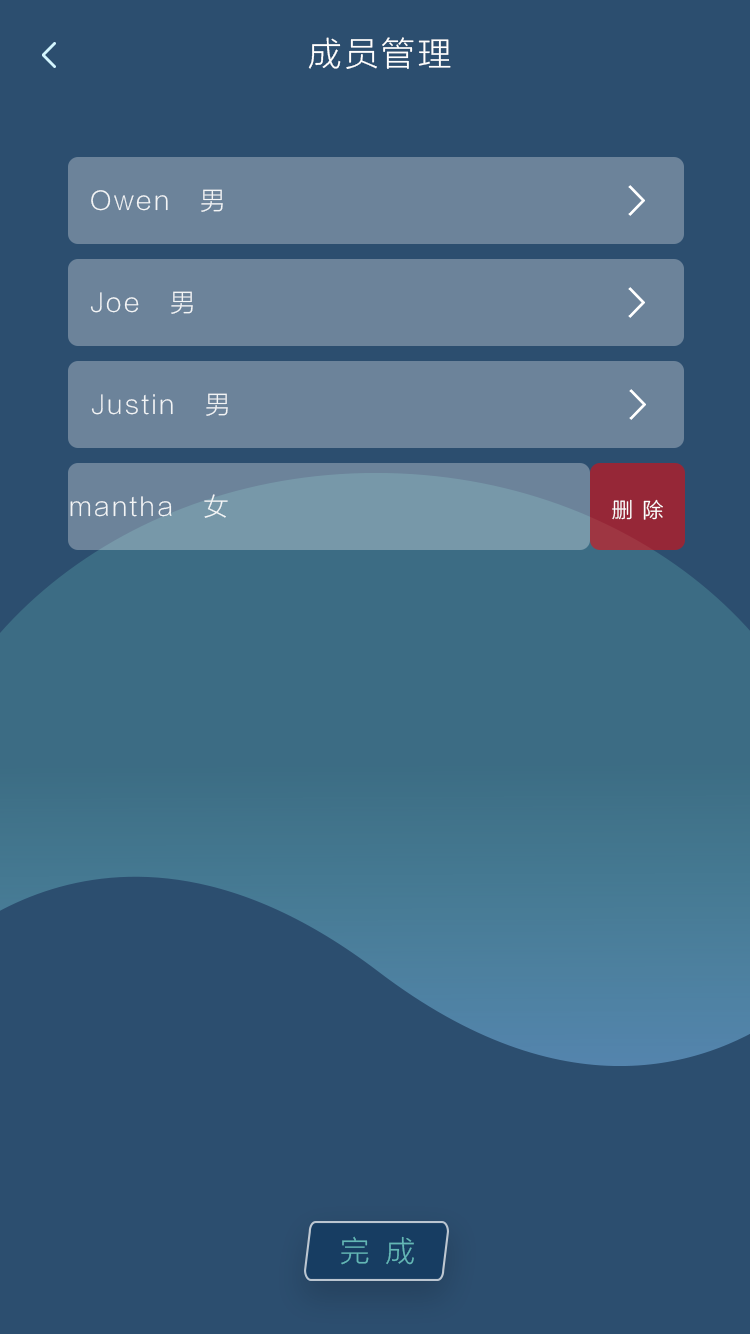
<style>
.page{position:relative;width:750px;height:1334px;background:#2c4e6f}
.page>*{position:absolute;margin:0}
.t1{font:33.3px "FZLTXHJW--GB1-0";letter-spacing:0.1em;color:#ffffff}
.t2{font:25px "FZLTXHJW--GB1-0";letter-spacing:0.1em;color:#ffffff}
.t3{font:25px "FZLTXHJW--GB1-0";letter-spacing:0.1em;color:#fefefe}
.t4{font:20.8px "FZLTXHJW--GB1-0";letter-spacing:0.1em;color:#ffffff}
.t5{font:29.2px "FZLTXHJW--GB1-0";color:#63b7b6}
</style>
<div class="page">
<p class="t1" style="left:308px;top:37px;width:143px;height:32px">成员管理</p>
<p class="t2" style="left:91px;top:189px;width:132px;height:23px;opacity:0.9">Owen   男</p>
<p class="t2" style="left:90px;top:291px;width:103px;height:23px;opacity:0.9">Joe   男</p>
<p class="t3" style="left:91px;top:393px;width:137px;height:23px;opacity:0.9">Justin   男</p>
<p class="t2" style="left:70px;top:494px;width:158px;height:24px;opacity:0.9">mantha   女</p>
<p class="t4" style="left:612px;top:499px;width:51px;height:21px">删 除</p>
<p class="t5" style="left:341px;top:1236px;width:73px;height:29px">完  成</p>
</div>
